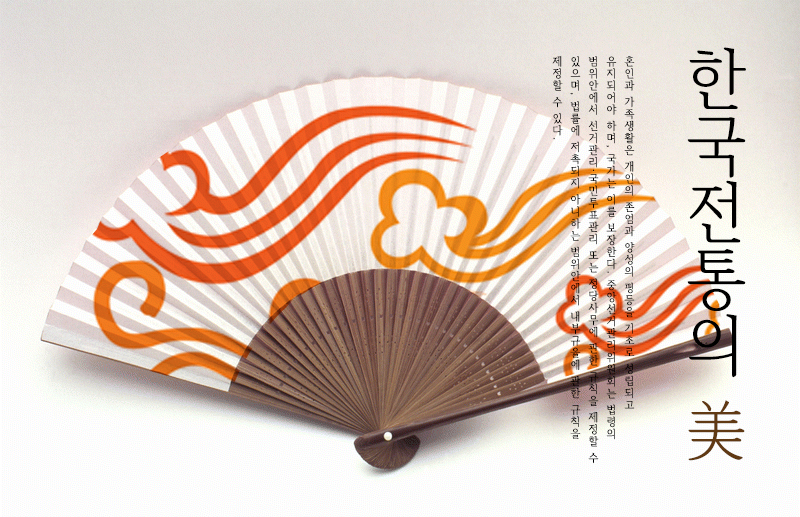
<style>
.page{position:relative;width:800px;height:517px}
.page>*{position:absolute;margin:0}
.t1{font:63px/0px "HCRBatang";letter-spacing:-0.005em;color:#000000;scale:1.06 1}
.t2{font:63px/0px "HCRBatang";letter-spacing:-0.005em;color:#603913;scale:1.06 1}
.t3{font:10.3px/18px "HCRBatang";letter-spacing:0.095em;color:#000000;scale:1.06 1}
.t4{font:11px/18px "HCRBatang";letter-spacing:0.095em;color:#000000;scale:0.94 1}
</style>
<div class="page">
<p class="t1" style="left:687px;top:47px;width:59px;height:414px;text-align:center">한국전통의 <span class="t2">美</span></p>
<p class="t3" style="left:552px;top:56px;width:83px;height:408px">혼인과 가족생활은 개인의 존엄과 양성의 평등을 기초로 성립되고 유지되어야 하며<span class="t4">, </span>국가는 이를 보장한다<span class="t4">. </span>중앙선거관리위원회는 법령의 범위안에서 선거관리<span class="t4">·</span>국민투표관리 또는 정당사무에 관한 규칙을 제정할 수 있으며<span class="t4">, </span>법률에 저촉되지 아니하는 범위안에서 내부규율에 관한 규칙을 제정할 수 있다<span class="t4">.</span></p>
</div>
